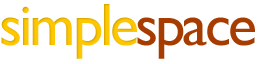
<style>
.page{position:relative;width:257px;height:64px;background:#ffffff}
.page>*{position:absolute;margin:0}
.t1{font:60px "GillSans";letter-spacing:-0.05em;color:#ffc700}
.t2{font:60px "GillSans";letter-spacing:-0.05em;color:#a63c00}
</style>
<div class="page">
<p class="t1" style="left:1px;top:4px;width:136px;height:55px">simple</p>
<p class="t2" style="left:137px;top:17px;width:118px;height:42px">space</p>
</div>
